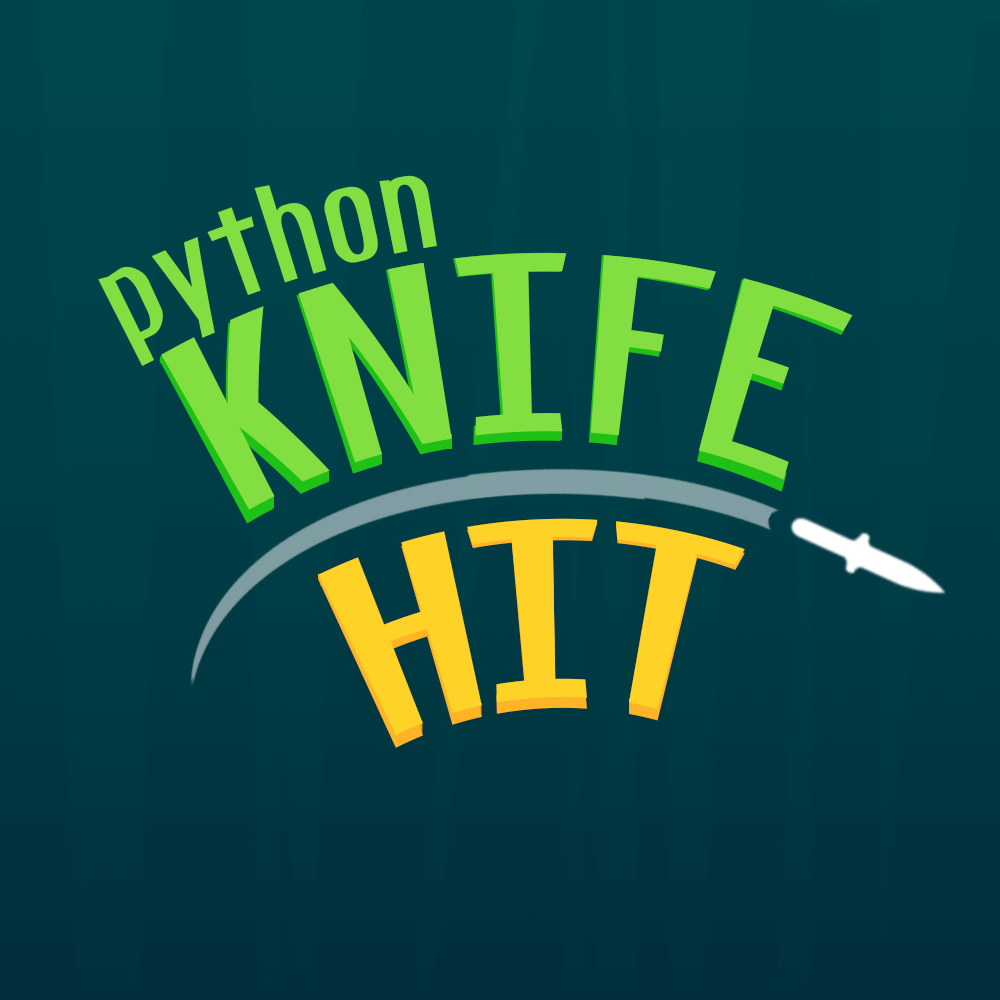
<style>
.page{position:relative;width:1000px;height:1000px}
.page>*{position:absolute;margin:0}
.t1{font:122px "FundamentalRush";letter-spacing:0.05em;color:#82de41}
.t2{font:234.1px "FundamentalRush";letter-spacing:0.05em;color:#82de41;scale:0.95 1}
.t3{font:222px "FundamentalRush";letter-spacing:0.05em;color:#82de41}
.t4{font:232.5px "FundamentalRush";color:#ffd227;scale:0.96 1}
.t5{font:222px "FundamentalRush";color:#ffd227}
</style>
<div class="page">
<p class="t1" style="left:98px;top:175px;width:339px;height:191px;rotate:-18deg">python</p>
<p class="t2" style="left:159px;top:252px;width:692px;height:272px;rotate:-3deg">KNIFE</p>
<p class="t3" style="left:161px;top:253px;width:692px;height:257px;rotate:-3deg">KNIFE</p>
<p class="t4" style="left:318px;top:521px;width:427px;height:227px;rotate:-4deg">HIT</p>
<p class="t5" style="left:318px;top:518px;width:427px;height:217px;rotate:-4deg">HIT</p>
</div>
